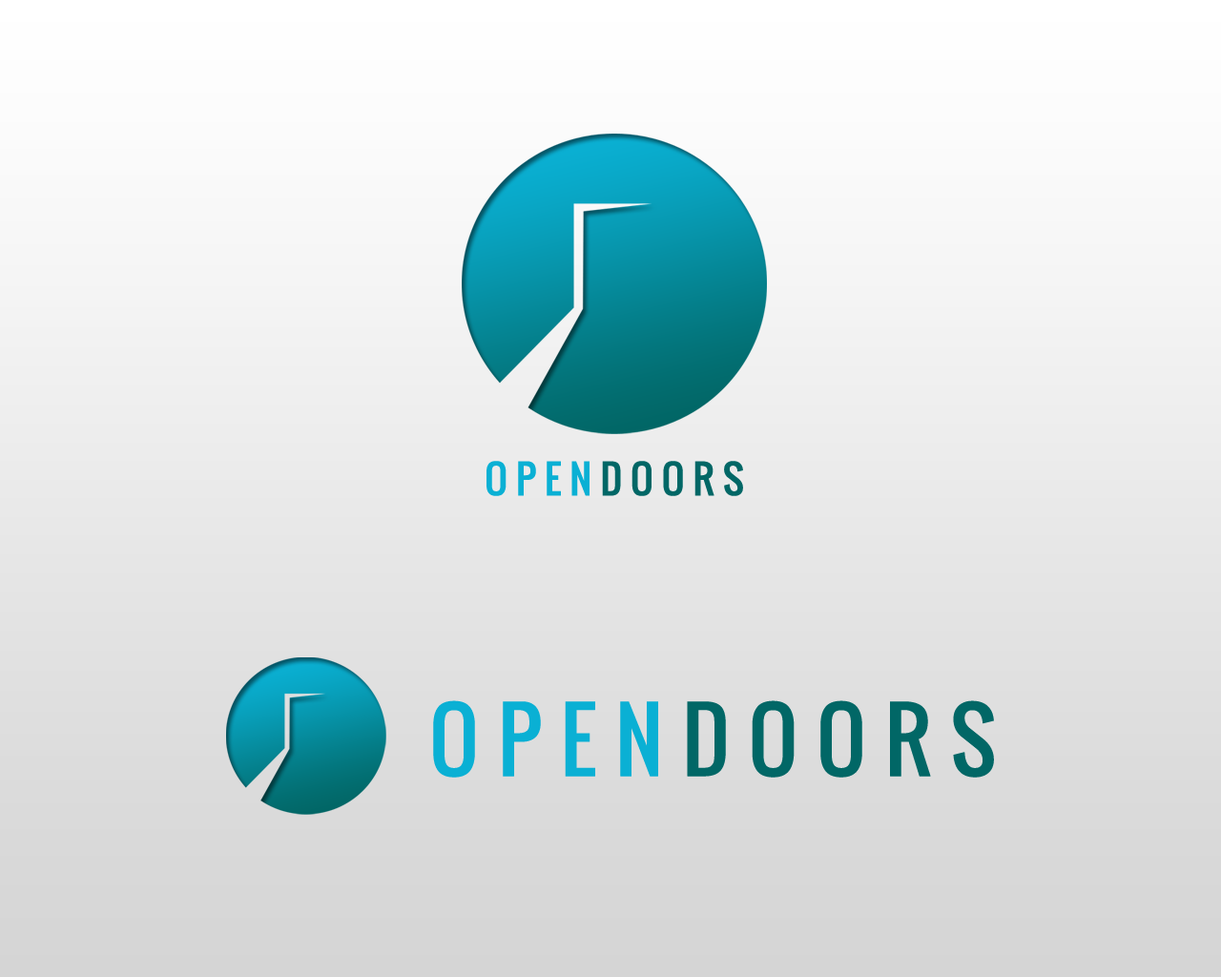
<style>
.page{position:relative;width:1221px;height:977px}
.page>*{position:absolute;margin:0}
.t1{font:38.8px "Oswald-Regular";letter-spacing:0.2em;color:#016766;text-transform:uppercase;font-weight:bold}
.t2{font:38.8px "Oswald-Regular";letter-spacing:0.2em;color:#0ab0d4;text-transform:uppercase;font-weight:bold}
.t3{font:71.1px "Oswald-Regular";letter-spacing:0.2em;color:#ffffff;text-transform:uppercase;font-weight:bold}
.t4{font:84.9px "Oswald-Regular";letter-spacing:0.2em;color:#016766;text-transform:uppercase;font-weight:bold}
.t5{font:84.9px "Oswald-Regular";letter-spacing:0.2em;color:#0ab0d4;text-transform:uppercase;font-weight:bold}
.t6{font:155.7px "Oswald-Regular";letter-spacing:0.2em;color:#ffffff;text-transform:uppercase;font-weight:bold}
</style>
<div class="page">
<p class="t1" style="left:486px;top:461px;width:257px;height:35px"><span class="t2">open</span>doors<span class="t3">s</span></p>
<p class="t4" style="left:433px;top:700px;width:561px;height:77px"><span class="t5">open</span>doors<span class="t6">s</span></p>
</div>
